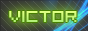
<style>
.page{position:relative;width:88px;height:31px}
.page>*{position:absolute;margin:0}
.t1{font:22px "VisitorTT1BRK";letter-spacing:-0.01em;color:#cffa7f}
</style>
<div class="page">
<p class="t1" style="left:9px;top:11px;width:68px;height:11px">Victor</p>
</div>
